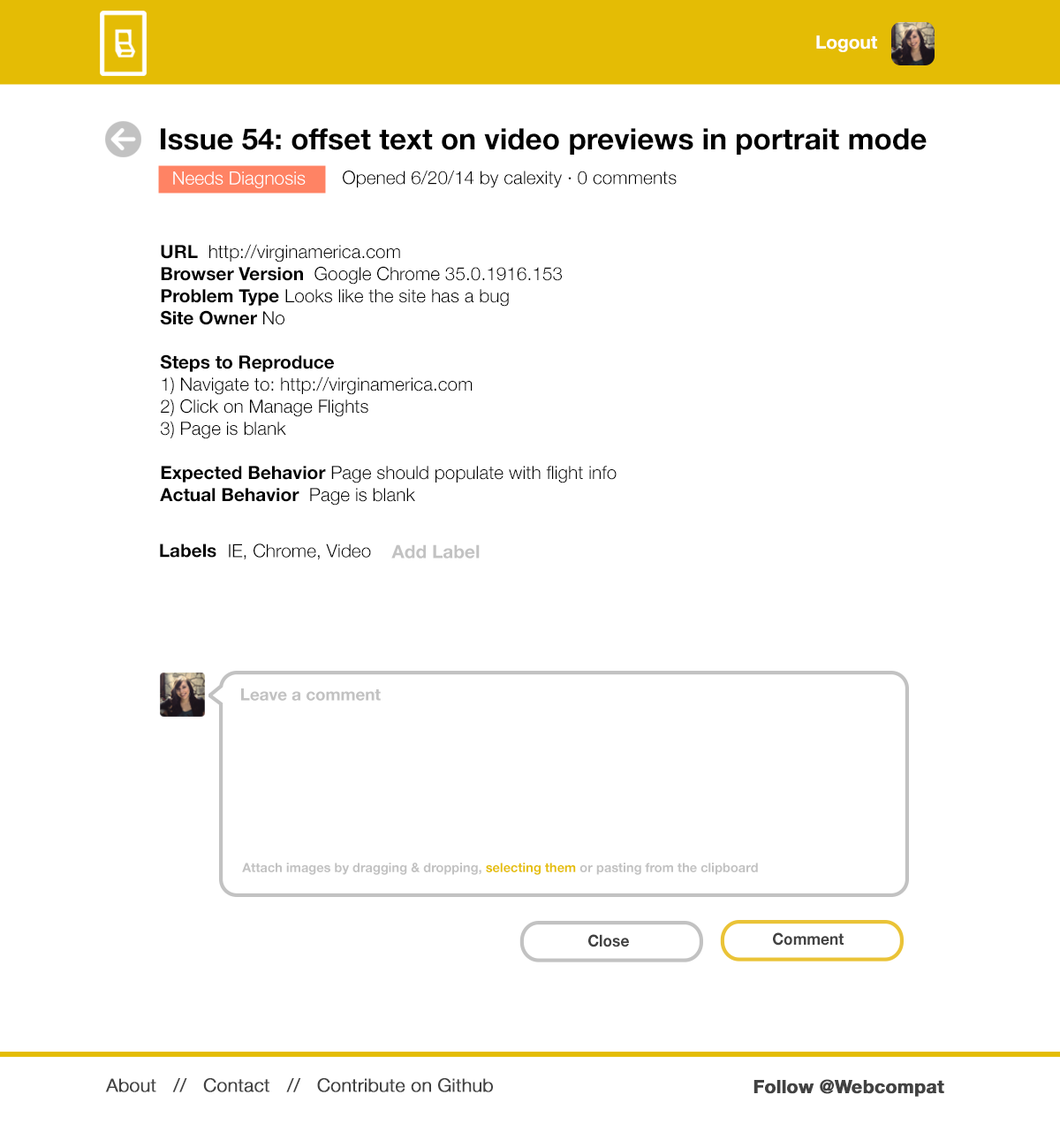
<style>
.page{position:relative;width:1060px;height:1125px;background:#ffffff}
.page>*{position:absolute;margin:0}
.t1{font:18.4px "HelveticaNeue-Bold";color:#ffffff}
.t2{font:29.5px "HelveticaNeue-Bold";color:#000000}
.t3{font:18.4px "HelveticaNeue-Light";color:#ffffff}
.t4{font:18.4px "HelveticaNeue-Light";color:#000000}
.t5{font:18.4px "HelveticaNeue-Bold";color:#000000}
.t6{font:18.4px "HelveticaNeue-Bold";color:#c2c2c2}
.t7{font:16.6px "HelveticaNeue-Bold";color:#c2c2c2}
.t8{font:12.9px "HelveticaNeue-Bold";color:#c2c2c2}
.t9{font:12.9px "HelveticaNeue-Bold";color:#e5bf04}
.t10{font:16.4px "HelveticaNeue-Bold";color:#424242;scale:0.94 1}
.t11{font:18.4px "HelveticaNeue-Light";color:#424242;font-weight:bold}
.t12{font:18.4px "HelveticaNeue-Bold";color:#424242;font-weight:bold}
</style>
<div class="page">
<p class="t1" style="left:816px;top:35px;width:61px;height:17px">Logout</p>
<p class="t2" style="left:161px;top:128px;width:766px;height:27px">Issue 54: offset text on video previews in portrait mode</p>
<p class="t3" style="left:173px;top:171px;width:133px;height:17px">Needs Diagnosis</p>
<p class="t4" style="left:343px;top:171px;width:334px;height:17px">Opened 6/20/14 by calexity · 0 comments</p>
<p class="t4" style="left:160px;top:244px;width:457px;height:261px"><span class="t5">URL </span> http://virginamerica.com<br><span class="t5">Browser Version</span>  Google Chrome 35.0.1916.153<br><span class="t5">Problem Type</span> Looks like the site has a bug<br><span class="t5">Site Owner </span>No<br><br><span class="t5">Steps to Reproduce<br></span>1) Navigate to: http://virginamerica.com<br>2) Click on Manage Flights<br>3) Page is blank<br><br><span class="t5">Expected Behavior</span> Page should populate with flight info<br><span class="t5">Actual Behavior</span>  Page is blank</p>
<p class="t5" style="left:160px;top:543px;width:56px;height:14px">Labels</p>
<p class="t4" style="left:229px;top:543px;width:142px;height:17px">IE, Chrome, Video</p>
<p class="t6" style="left:391px;top:544px;width:89px;height:14px">Add Label</p>
<p class="t7" style="left:241px;top:688px;width:140px;height:13px">Leave a comment</p>
<p class="t8" style="left:242px;top:862px;width:516px;height:13px">Attach images by dragging &amp; dropping, <span class="t9">selecting them</span> or pasting from the clipboard</p>
<p class="t10" style="left:588px;top:934px;width:41px;height:13px">Close</p>
<p class="t10" style="left:773px;top:932px;width:71px;height:13px">Comment</p>
<p class="t11" style="left:105px;top:1078px;width:388px;height:14px">About   //   Contact   //   Contribute on Github</p>
<p class="t12" style="left:754px;top:1079px;width:190px;height:17px">Follow @Webcompat</p>
</div>
